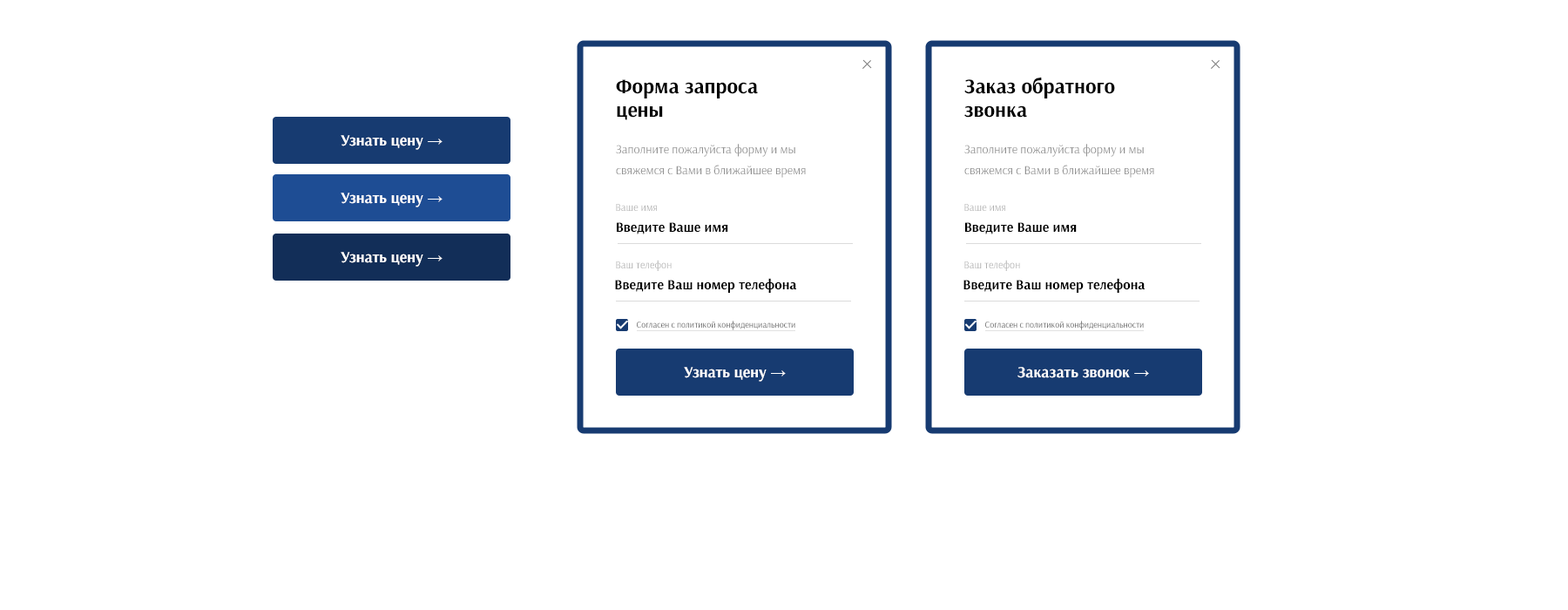
<style>
.page{position:relative;width:1568px;height:610px;background:#ffffff}
.page>*{position:absolute;margin:0}
.t1{font:20.9px/23.5px "Arsenal-Bold";color:#000000}
.t2{font:15.7px "Arsenal-Bold";color:#ffffff}
.t3{font:15.7px "ArialNarrow";color:#ffffff}
.t4{font:12.2px/20.9px "Arsenal-Regular";color:#929292}
.t5{font:10.5px "Arsenal-Regular";color:#b1b1b1}
.t6{font:13.9px "Arsenal-Bold";color:#000000}
.t7{font:8.7px "Arsenal-Regular"}
</style>
<div class="page">
<p class="t1" style="left:964px;top:78px;width:151px;height:40px">Заказ обратного <br>звонка</p>
<p class="t1" style="left:616px;top:79px;width:142px;height:41px">Форма запроса<br>цены</p>
<p class="t2" style="left:341px;top:135px;width:102px;height:15px">Узнать цену <span class="t3">→</span></p>
<p class="t4" style="left:616px;top:144px;width:190px;height:34px">Заполните пожалуйста форму и мы <br>свяжемся с Вами в ближайшее время</p>
<p class="t4" style="left:964px;top:144px;width:190px;height:34px">Заполните пожалуйста форму и мы <br>свяжемся с Вами в ближайшее время</p>
<p class="t2" style="left:341px;top:193px;width:102px;height:14px">Узнать цену <span class="t3">→</span></p>
<p class="t5" style="left:616px;top:204px;width:41px;height:7px">Ваше имя</p>
<p class="t5" style="left:964px;top:204px;width:41px;height:7px">Ваше имя</p>
<p class="t6" style="left:617px;top:222px;width:111px;height:12px">Введите Ваше имя</p>
<p class="t6" style="left:965px;top:222px;width:112px;height:12px">Введите Ваше имя</p>
<p class="t2" style="left:341px;top:252px;width:102px;height:15px">Узнать цену <span class="t3">→</span></p>
<p class="t5" style="left:616px;top:260px;width:56px;height:11px">Ваш телефон</p>
<p class="t5" style="left:964px;top:260px;width:56px;height:11px">Ваш телефон</p>
<p class="t6" style="left:615px;top:278px;width:182px;height:15px">Введите Ваш номер телефона</p>
<p class="t6" style="left:963px;top:278px;width:183px;height:15px">Введите Ваш номер телефона</p>
<p class="t7" style="left:637px;top:321px;width:158px;height:9px">Согласен с политикой конфиденциальности</p>
<p class="t7" style="left:985px;top:321px;width:159px;height:9px">Согласен с политикой конфиденциальности</p>
<p class="t2" style="left:684px;top:367px;width:102px;height:15px">Узнать цену <span class="t3">→</span></p>
<p class="t2" style="left:1017px;top:367px;width:132px;height:11px">Заказать звонок <span class="t3">→</span></p>
</div>
